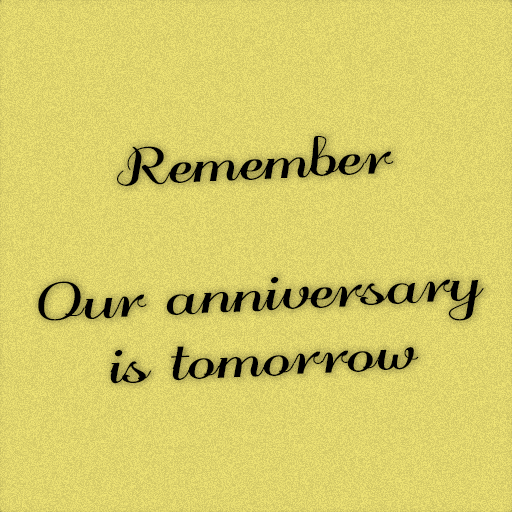
<style>
.page{position:relative;width:512px;height:512px}
.page>*{position:absolute;margin:0}
.t1{font:65.2px/65.6px "odstemplikBold";color:#000000;scale:1.15 1}
</style>
<div class="page">
<p class="t1" style="left:38px;top:135px;width:446px;height:249px;text-align:center;rotate:-3deg">Remember<br><br>Our anniversary<br>is tomorrow</p>
</div>
